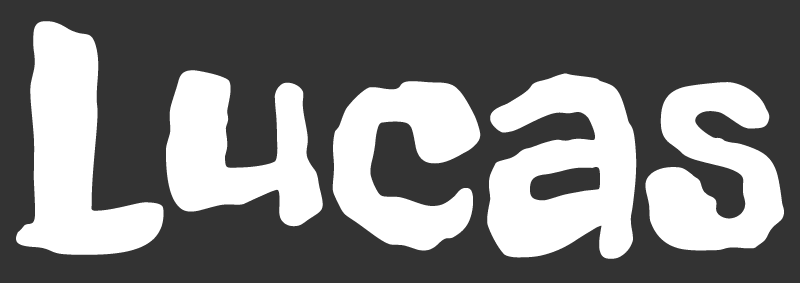
<style>
.page{position:relative;width:800px;height:283px;background:#333333}
.page>*{position:absolute;margin:0}
.t1{font:311.2px "FreckleFace-Regular";color:#ffffff}
</style>
<div class="page">
<p class="t1" style="left:16px;top:21px;width:768px;height:238px">Lucas</p>
</div>
